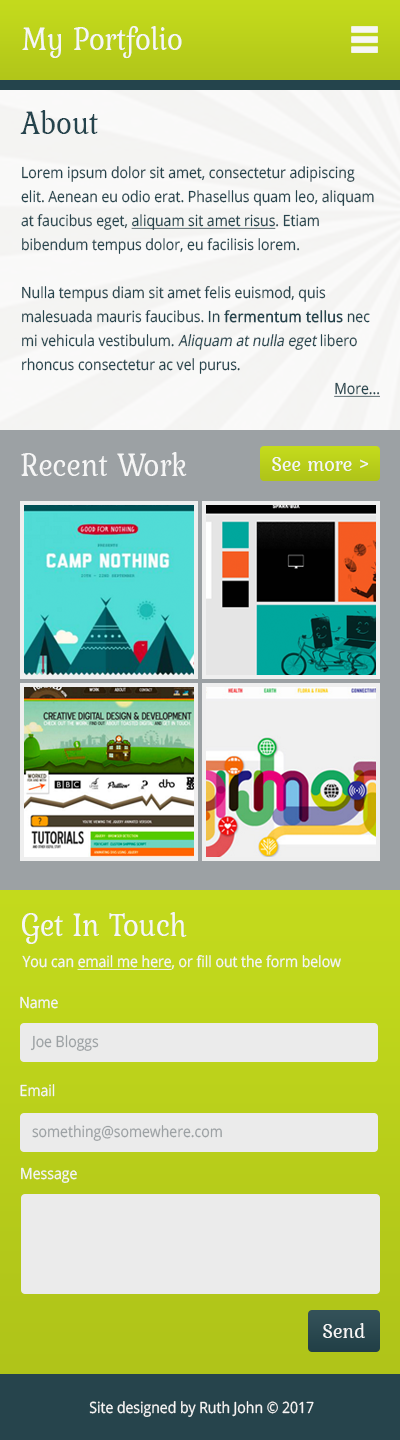
<style>
.page{position:relative;width:400px;height:1440px}
.page>*{position:absolute;margin:0}
.t1{font:33px "Kurale-Regular";color:#f6f6f6;scale:0.91 1}
.t2{font:33px "Kurale-Regular";color:#25444d;scale:0.91 1}
.t3{font:15.4px/24px "OpenSans";color:#25444d;scale:0.91 1}
.t4{font:15.4px/24px "OpenSans";color:#25444d;text-decoration:underline;scale:0.91 1}
.t5{font:15.4px/24px "OpenSans";color:#25444d;font-weight:bold;scale:0.91 1}
.t6{font:15.4px/24px "OpenSans";color:#25444d;font-style:italic;scale:0.91 1}
.t7{font:22px "Kurale-Regular";color:#f6f6f6;scale:0.91 1}
.t8{font:15.4px "OpenSans";color:#f6f6f6;scale:0.91 1}
.t9{font:15.4px "OpenSans";color:#f6f6f6;text-decoration:underline;scale:0.91 1}
.t10{font:15.4px "OpenSans";color:#9ca1a4;scale:0.91 1}
</style>
<div class="page">
<p class="t1" style="left:22px;top:26px;width:160px;height:33px">My Portfolio</p>
<p class="t2" style="left:20px;top:110px;width:78px;height:24px">About</p>
<p class="t3" style="left:21px;top:166px;width:359px;height:231px">Lorem ipsum dolor sit amet, consectetur adipiscing elit. Aenean eu odio erat. Phasellus quam leo, aliquam at faucibus eget, <span class="t4">aliquam sit amet risus</span>. Etiam bibendum tempus dolor, eu facilisis lorem.<br><br>Nulla tempus diam sit amet felis euismod, quis malesuada mauris faucibus. In <span class="t5">fermentum tellus</span> nec mi vehicula vestibulum. <span class="t6">Aliquam at nulla eget</span> libero rhoncus consectetur ac vel purus.<br><span class="t4">More...</span></p>
<p class="t1" style="left:21px;top:452px;width:166px;height:24px">Recent Work</p>
<p class="t7" style="left:272px;top:457px;width:97px;height:14px">See more &gt;</p>
<p class="t1" style="left:22px;top:912px;width:165px;height:32px">Get In Touch</p>
<p class="t8" style="left:22px;top:955px;width:319px;height:15px">You can <span class="t9">email me here</span>, or fill out the form below</p>
<p class="t8" style="left:20px;top:996px;width:38px;height:13px">Name</p>
<p class="t10" style="left:30px;top:1035px;width:69px;height:16px">Joe Bloggs</p>
<p class="t8" style="left:20px;top:1084px;width:35px;height:13px">Email</p>
<p class="t10" style="left:32px;top:1125px;width:190px;height:16px">something@somewhere.com</p>
<p class="t8" style="left:21px;top:1167px;width:56px;height:16px">Message</p>
<p class="t7" style="left:323px;top:1323px;width:42px;height:15px">Send</p>
<p class="t8" style="left:89px;top:1401px;width:225px;height:16px">Site designed by Ruth John © 2017</p>
</div>
